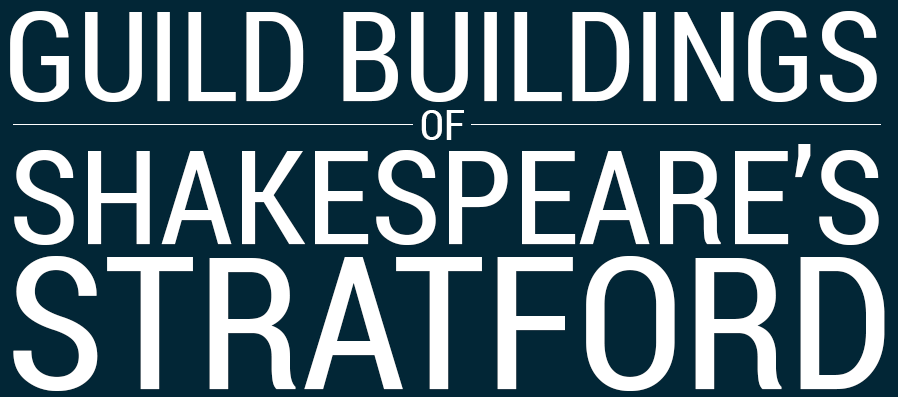
<style>
.page{position:relative;width:898px;height:397px;background:#022636}
.page>*{position:absolute;margin:0}
.t1{font:125px "RobotoCondensed-Regular";color:#ffffff}
.t2{font:41.7px "RobotoCondensed-Regular";color:#ffffff}
.t3{font:131.2px "RobotoCondensed-Regular";color:#ffffff}
.t4{font:185.4px "RobotoCondensed-Regular";color:#ffffff}
</style>
<div class="page">
<p class="t1" style="left:10px;top:11px;width:867px;height:91px">GUILD BUILDINGS</p>
<p class="t2" style="left:421px;top:110px;width:43px;height:30px">OF</p>
<p class="t3" style="left:14px;top:144px;width:865px;height:101px">SHAKESPEARE’S</p>
<p class="t4" style="left:13px;top:256px;width:872px;height:135px">STRATFORD</p>
</div>
